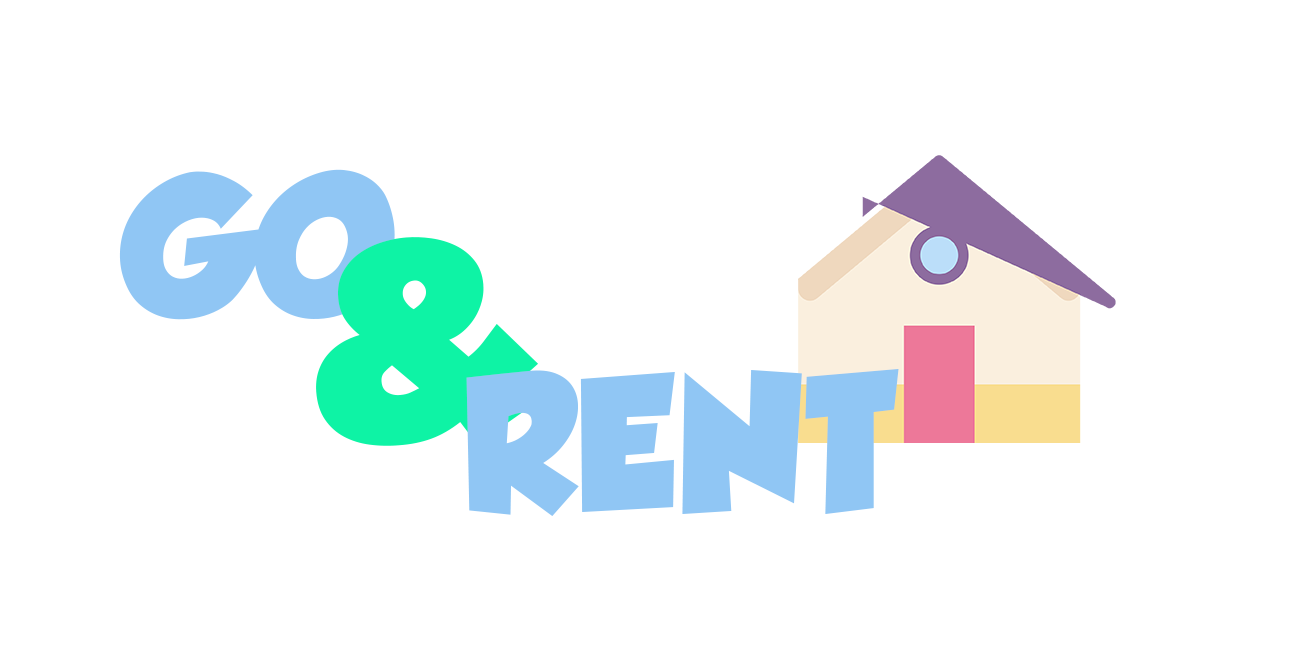
<style>
.page{position:relative;width:1294px;height:654px;background:#ffffff}
.page>*{position:absolute;margin:0}
.t1{font:170px "GROBOLD";color:#90c6f4}
.t2{font:250px "GROBOLD";color:#0ef3a5}
</style>
<div class="page">
<p class="t1" style="left:119px;top:169px;width:276px;height:151px">GO</p>
<p class="t2" style="left:316px;top:237px;width:222px;height:209px">&amp;</p>
<p class="t1" style="left:466px;top:369px;width:433px;height:147px">RENT</p>
</div>
